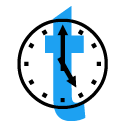
<style>
.page{position:relative;width:128px;height:128px;background:#ffffff}
.page>*{position:absolute;margin:0}
.t1{font:161px "ArialNarrow-Bold";color:#1da1f2}
</style>
<div class="page">
<p class="t1" style="left:45px;top:6px;width:41px;height:115px">t</p>
</div>
